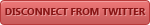
<style>
.page{position:relative;width:150px;height:25px}
.page>*{position:absolute;margin:0}
.t1{font:10px "SegoeUI-Bold";color:#881515}
</style>
<div class="page">
<p class="t1" style="left:5px;top:8px;width:141px;height:7px">DISCONNECT FROM TWITTER</p>
</div>
